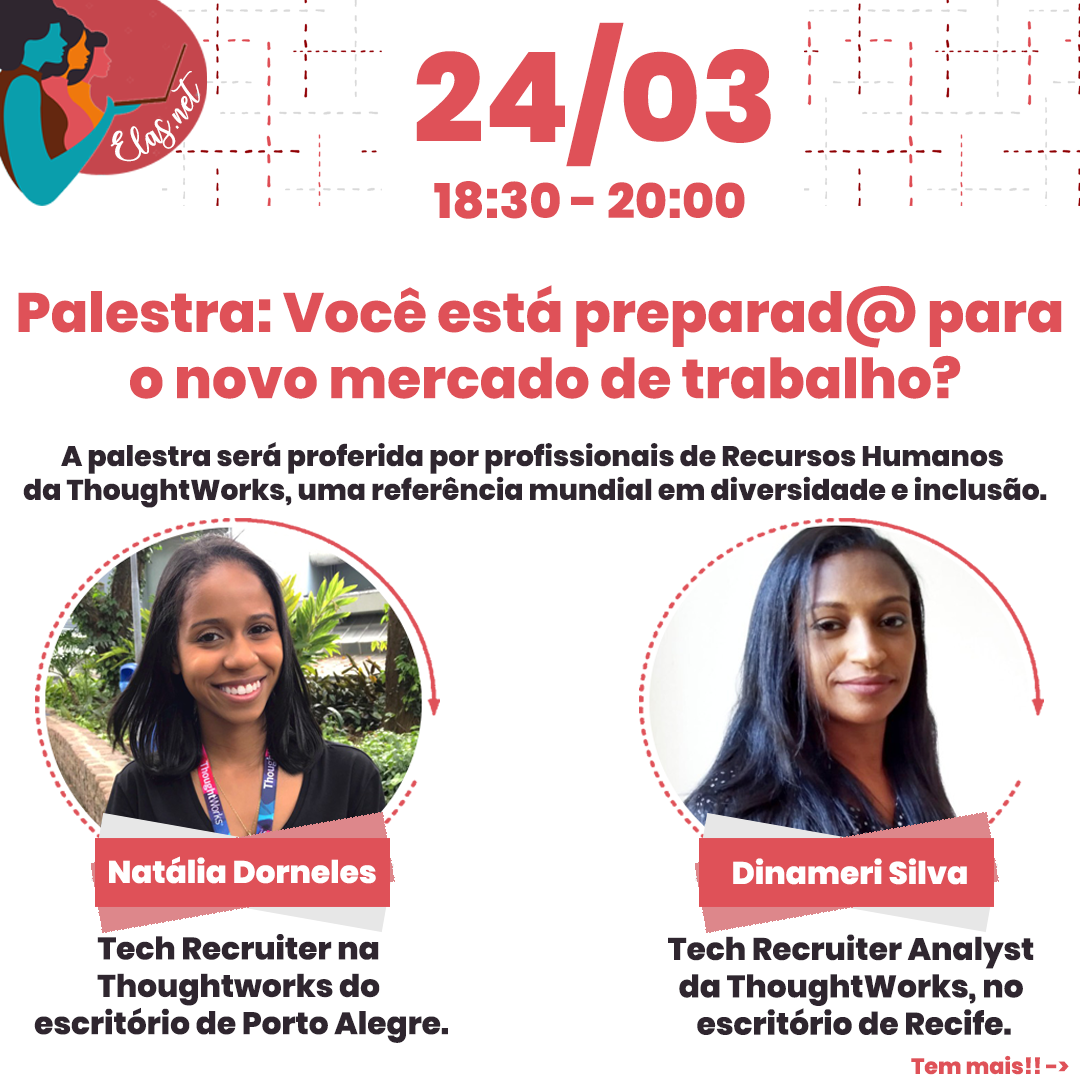
<style>
.page{position:relative;width:1080px;height:1080px;background:#ffffff}
.page>*{position:absolute;margin:0}
.t1{font:125.1px "Poppins-ExtraBold";color:#df5158}
.t2{font:25.7px "charlinda-Regular";color:#ffffff;scale:1.18 1}
.t3{font:49.1px "Poppins-ExtraBold";color:#df5158}
.t4{font:55.1px "Poppins-ExtraBold";color:#df5158}
.t5{font:28.1px "Poppins-ExtraBold";color:#2f262f}
.t6{font:31.1px "Poppins-ExtraBold";color:#ffffff}
.t7{font:31.1px "Poppins-ExtraBold";color:#2f262f}
.t8{font:22.1px "Poppins-ExtraBold";color:#df5158}
</style>
<div class="page">
<p class="t1" style="left:416px;top:22px;width:355px;height:145px">24/03</p>
<p class="t2" style="left:110px;top:71px;width:90px;height:91px;rotate:-43deg">Elas.net</p>
<p class="t3" style="left:434px;top:181px;width:311px;height:38px">18:30 - 20:00</p>
<p class="t4" style="left:18px;top:285px;width:1044px;height:114px;text-align:center">Palestra: Você está preparad@ para <br>o novo mercado de trabalho?</p>
<p class="t5" style="left:23px;top:442px;width:1024px;height:66px;text-align:center">A palestra será proferida por profissionais de Recursos Humanos <br>da ThoughtWorks, uma referência mundial em diversidade e inclusão.</p>
<p class="t6" style="left:109px;top:856px;width:267px;height:28px">Natália Dorneles</p>
<p class="t6" style="left:733px;top:858px;width:234px;height:27px">Dinameri Silva</p>
<p class="t7" style="left:34px;top:934px;width:414px;height:109px;text-align:center">Tech Recruiter na <br>Thoughtworks do <br>escritório de Porto Alegre.</p>
<p class="t7" style="left:668px;top:934px;width:366px;height:101px;text-align:center">Tech Recruiter Analyst <br>da ThoughtWorks, no <br>escritório de Recife.</p>
<p class="t8" style="left:911px;top:1055px;width:158px;height:20px">Tem mais!! -&gt;</p>
</div>
